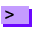
<style>
.page{position:relative;width:32px;height:32px;background:#c49cff}
.page>*{position:absolute;margin:0}
.t1{font:20px "Roboto-Regular";color:#000000}
</style>
<div class="page">
<p class="t1" style="left:5px;top:10px;width:9px;height:10px">&gt;</p>
</div>
